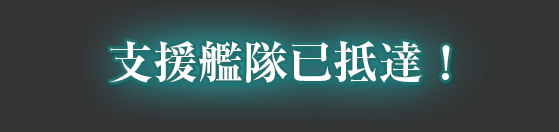
<style>
.page{position:relative;width:559px;height:132px;background:#333333}
.page>*{position:absolute;margin:0}
.t1{font:45px "RyuminPro-ExBold";color:#ffffff}
</style>
<div class="page">
<p class="t1" style="left:110px;top:40px;width:340px;height:43px">支援艦隊已抵達！</p>
</div>
